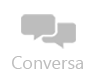
<style>
.page{position:relative;width:96px;height:80px;background:#ffffff}
.page>*{position:absolute;margin:0}
.t1{font:18px "SegoeUI";color:#bdbdbd}
</style>
<div class="page">
<p class="t1" style="left:12px;top:56px;width:71px;height:13px">Conversa</p>
</div>
